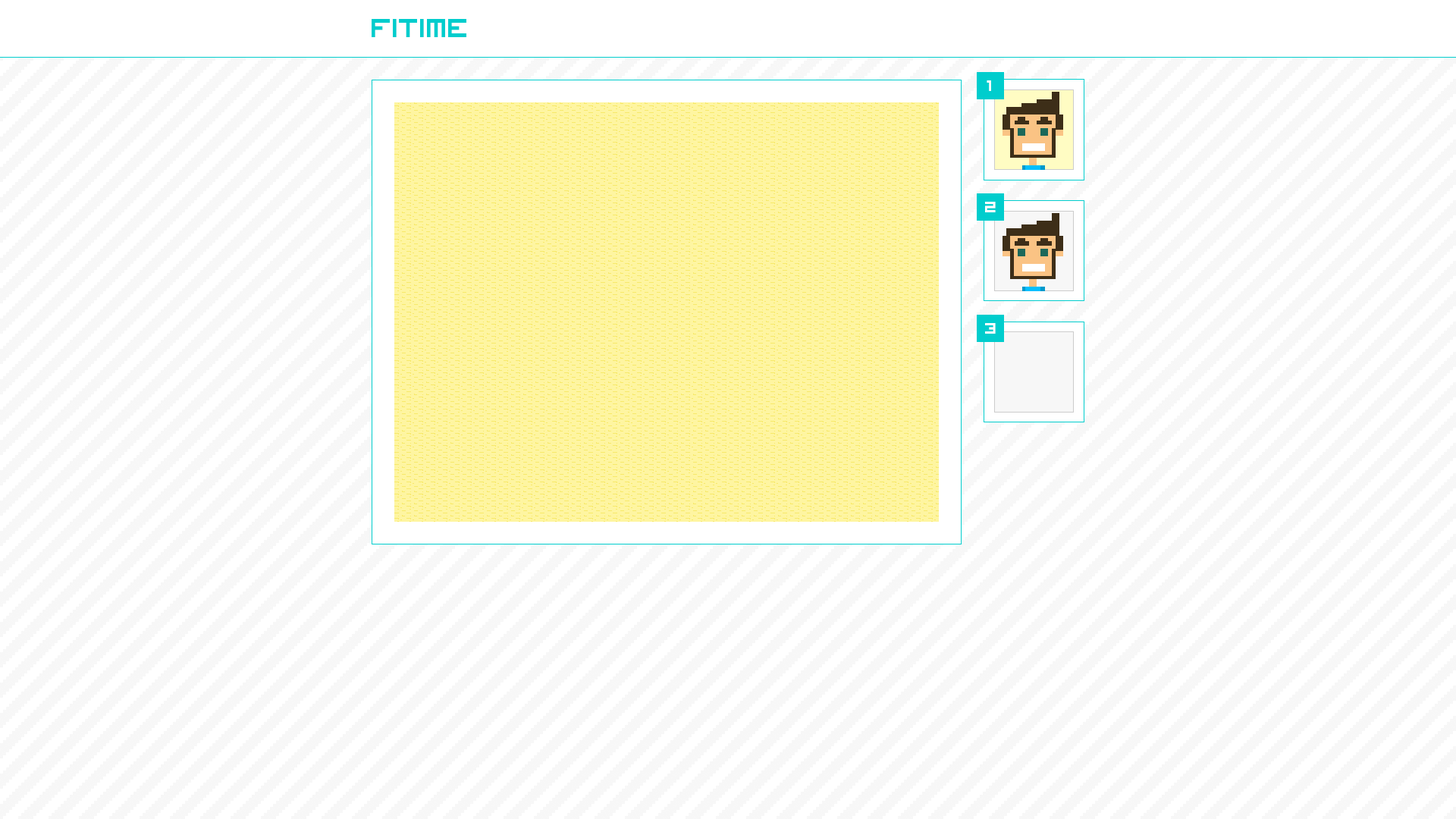
<style>
.page{position:relative;width:1456px;height:819px;background:#ffffff}
.page>*{position:absolute;margin:0}
.t1{font:36.4px "VisitorTT1BRK";letter-spacing:-0.02em;color:#00cdcd}
.t2{font:20.7px "VisitorTT1BRK";letter-spacing:-0.02em;color:#ffffff}
</style>
<div class="page">
<p class="t1" style="left:372px;top:19px;width:94px;height:18px">Fitime</p>
<p class="t2" style="left:987px;top:80px;width:4px;height:11px">1</p>
<p class="t2" style="left:985px;top:202px;width:11px;height:10px">2</p>
<p class="t2" style="left:985px;top:323px;width:11px;height:11px">3</p>
</div>
